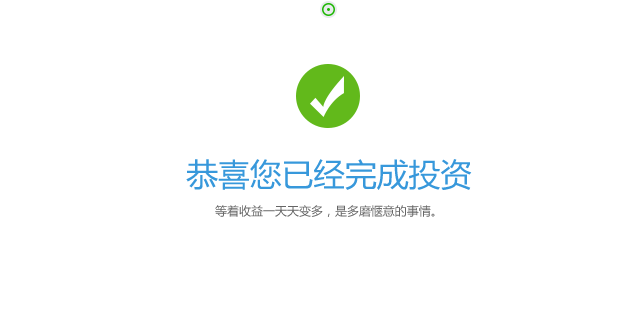
<style>
.page{position:relative;width:617px;height:310px;background:#ffffff}
.page>*{position:absolute;margin:0}
.t1{font:31.8px "MicrosoftYaHei";color:#3798db}
.t2{font:12px "MicrosoftYaHei";color:#666666}
</style>
<div class="page">
<p class="t1" style="left:186px;top:159px;width:286px;height:31px">恭喜您已经完成投资</p>
<p class="t2" style="left:215px;top:205px;width:220px;height:12px">等着收益一天天变多，是多磨惬意的事情。</p>
</div>
